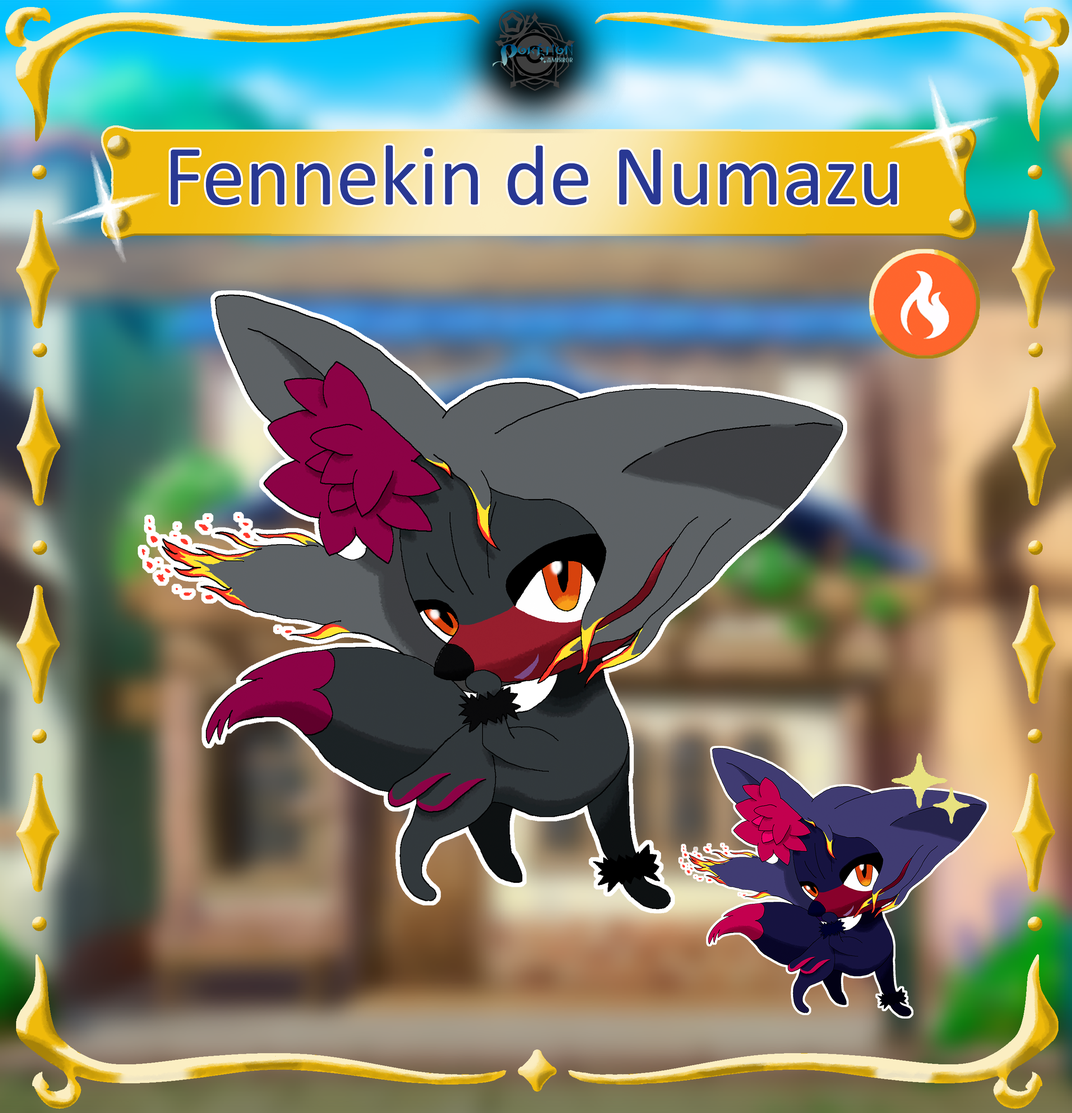
<style>
.page{position:relative;width:1072px;height:1113px}
.page>*{position:absolute;margin:0}
.t1{font:86.6px "Calibri";color:#293893}
</style>
<div class="page">
<p class="t1" style="left:170px;top:145px;width:727px;height:60px">Fennekin de Numazu</p>
</div>
